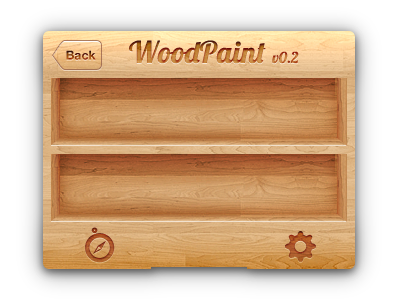
<style>
.page{position:relative;width:400px;height:300px}
.page>*{position:absolute;margin:0}
.t1{font:30px "Lobster1.4";letter-spacing:0.01em}
.t2{font:15px "Lobster1.4";letter-spacing:0.01em}
.t3{font:12.3px "HelveticaNeue-Bold"}
</style>
<div class="page">
<p class="t1" style="left:129px;top:40px;width:170px;height:24px">WoodPaint <span class="t2">v0.2</span></p>
<p class="t3" style="left:66px;top:50px;width:30px;height:10px">Back</p>
</div>
